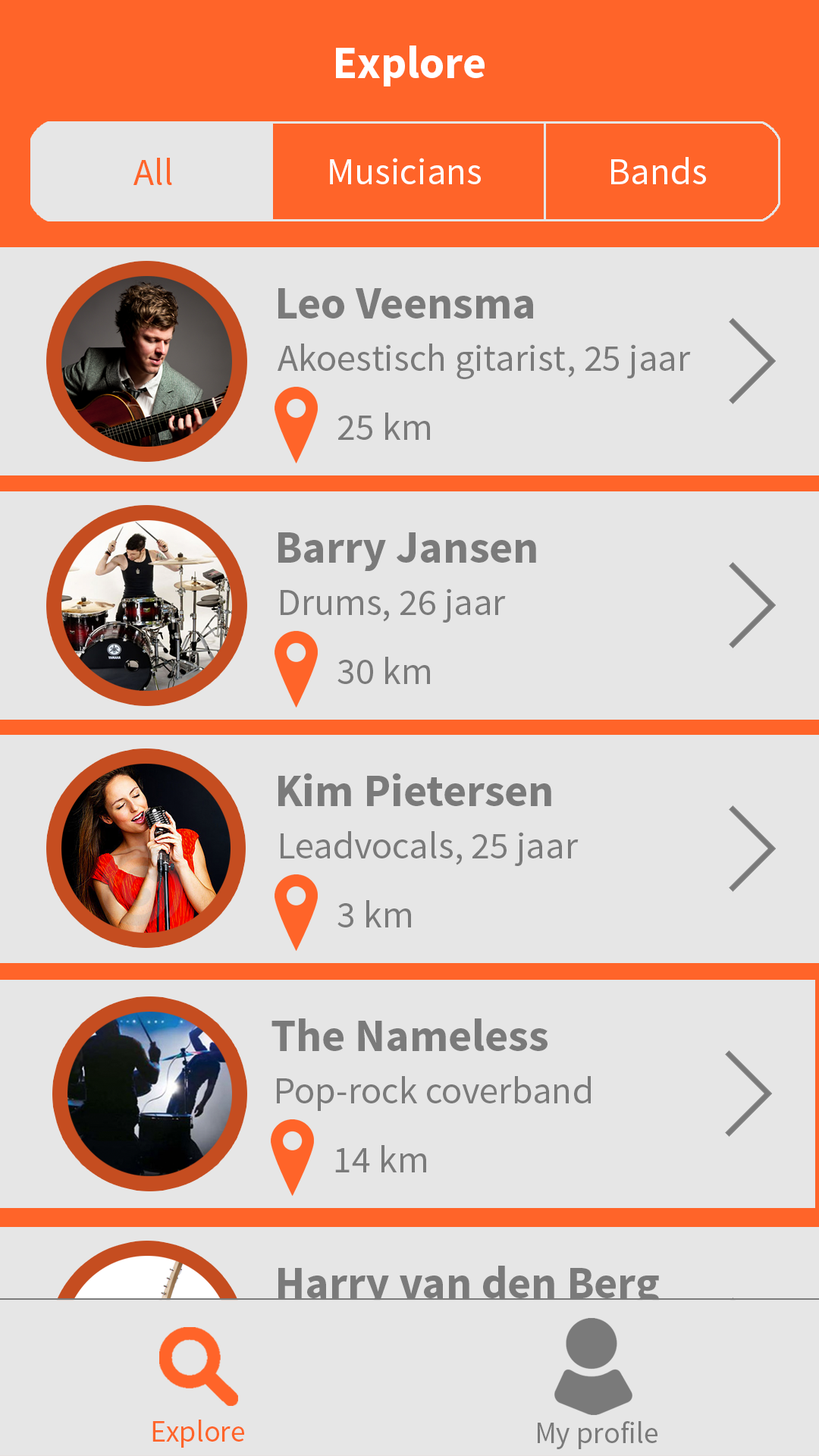
<style>
.page{position:relative;width:819px;height:1456px;background:#e6e6e6}
.page>*{position:absolute;margin:0}
.t1{font:45.5px "SourceSansPro-Bold";color:#ffffff}
.t2{font:37.9px "SourceSansPro-Regular";color:#ff6429}
.t3{font:37.9px "SourceSansPro-Regular";color:#ffffff}
.t4{font:45.5px "SourceSansPro-Bold";color:#7a7a7a}
.t5{font:37.9px "SourceSansPro-Regular";color:#7a7a7a}
.t6{font:30.3px "SourceSansPro-Regular";color:#ff6429}
.t7{font:30.3px "SourceSansPro-Regular";color:#7a7a7a}
</style>
<div class="page">
<p class="t1" style="left:336px;top:45px;width:149px;height:41px">Explore</p>
<p class="t2" style="left:133px;top:158px;width:39px;height:27px">All</p>
<p class="t3" style="left:330px;top:158px;width:151px;height:26px">Musicians</p>
<p class="t3" style="left:611px;top:157px;width:95px;height:27px">Bands</p>
<p class="t4" style="left:278px;top:288px;width:255px;height:30px">Leo Veensma</p>
<p class="t5" style="left:278px;top:344px;width:413px;height:35px">Akoestisch gitarist, 25 jaar</p>
<p class="t5" style="left:337px;top:413px;width:93px;height:27px">25 km</p>
<p class="t4" style="left:278px;top:532px;width:258px;height:39px">Barry Jansen</p>
<p class="t5" style="left:281px;top:588px;width:225px;height:35px">Drums, 26 jaar</p>
<p class="t5" style="left:337px;top:657px;width:93px;height:27px">30 km</p>
<p class="t4" style="left:278px;top:773px;width:273px;height:33px">Kim Pietersen</p>
<p class="t5" style="left:281px;top:831px;width:298px;height:35px">Leadvocals, 25 jaar</p>
<p class="t5" style="left:337px;top:900px;width:74px;height:27px">3 km</p>
<p class="t4" style="left:271px;top:1018px;width:277px;height:33px">The Nameless</p>
<p class="t5" style="left:277px;top:1076px;width:314px;height:35px">Pop-rock coverband</p>
<p class="t5" style="left:335px;top:1145px;width:91px;height:27px">14 km</p>
<p class="t4" style="left:278px;top:1266px;width:381px;height:42px">Harry van den Berg</p>
<p class="t6" style="left:152px;top:1420px;width:92px;height:28px">Explore</p>
<p class="t7" style="left:538px;top:1421px;width:119px;height:28px">My profile</p>
</div>
